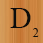
<style>
.page{position:relative;width:43px;height:43px}
.page>*{position:absolute;margin:0}
.t1{font:30px "TimesNewRomanPSMT";color:#0c0c0b}
.t2{font:12px "TimesNewRomanPSMT";color:#0c0c0b}
</style>
<div class="page">
<p class="t1" style="left:10px;top:8px;width:21px;height:20px">D</p>
<p class="t2" style="left:32px;top:28px;width:7px;height:9px">2</p>
</div>
